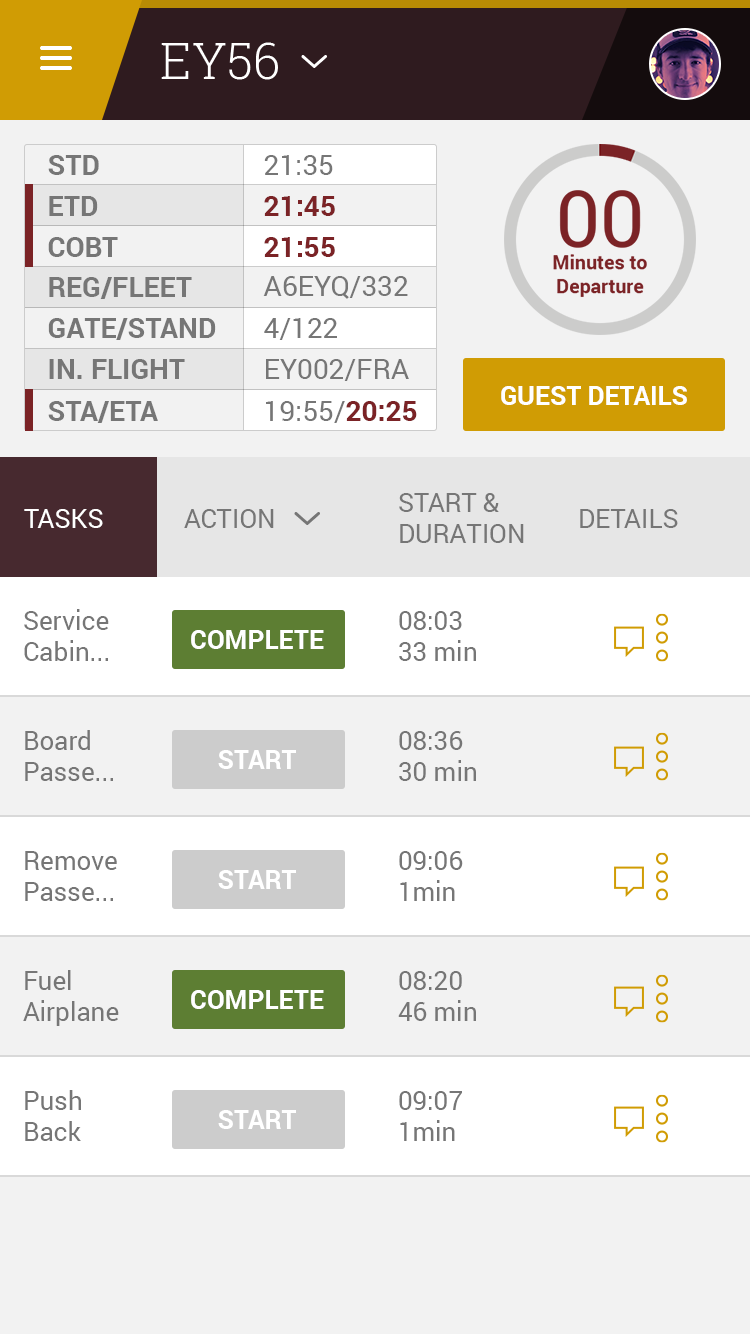
<style>
.page{position:relative;width:750px;height:1334px;background:#f2f2f2}
.page>*{position:absolute;margin:0}
.t1{font:28px "Roboto-Bold";color:#767676;text-transform:uppercase}
.t2{font:28px "Roboto-Regular";color:#767676}
.t3{font:28px "Roboto-Bold";color:#7b2326}
.t4{font:28px "Roboto-Regular";color:#767676;text-transform:uppercase}
.t5{font:26px "Roboto-Bold";color:#ffffff;text-transform:uppercase}
.t6{font:26px "Roboto-Regular";color:#767676;text-transform:uppercase}
.t7{font:26px "Roboto-Regular";color:#ffffff;text-transform:uppercase}
.t8{font:26px "Roboto-Regular";color:#767676}
</style>
<div class="page">
<p class="t1" style="left:48px;top:155px;width:51px;height:20px">STD</p>
<p class="t2" style="left:264px;top:155px;width:69px;height:20px">21:35</p>
<p class="t1" style="left:49px;top:196px;width:49px;height:20px">ETD</p>
<p class="t3" style="left:264px;top:196px;width:71px;height:20px">21:45</p>
<p class="t1" style="left:48px;top:237px;width:70px;height:20px">COBT</p>
<p class="t3" style="left:264px;top:237px;width:71px;height:20px">21:55</p>
<p class="t1" style="left:49px;top:277px;width:143px;height:22px">Reg/Fleet</p>
<p class="t2" style="left:263px;top:276px;width:145px;height:23px">A6EYQ/332</p>
<p class="t1" style="left:48px;top:318px;width:168px;height:22px">Gate/Stand</p>
<p class="t2" style="left:264px;top:318px;width:73px;height:22px">4/122</p>
<p class="t1" style="left:49px;top:359px;width:136px;height:20px">In. Flight</p>
<p class="t4" style="left:266px;top:359px;width:143px;height:22px">EY002/Fra</p>
<p class="t5" style="left:501px;top:386px;width:186px;height:19px">Guest Details</p>
<p class="t1" style="left:48px;top:401px;width:110px;height:22px">STA/ETA</p>
<p class="t2" style="left:266px;top:401px;width:151px;height:22px">19:55/<span class="t3">20:25</span></p>
<p class="t6" style="left:399px;top:493px;width:125px;height:50px">Start &amp;<br>Duration</p>
<p class="t7" style="left:24px;top:509px;width:79px;height:19px">tasks</p>
<p class="t6" style="left:184px;top:509px;width:90px;height:19px">Action</p>
<p class="t6" style="left:580px;top:509px;width:98px;height:19px">Details</p>
<p class="t8" style="left:24px;top:609px;width:85px;height:52px">Service<br>Cabin...</p>
<p class="t8" style="left:399px;top:611px;width:77px;height:50px">08:03<br>33 min</p>
<p class="t5" style="left:191px;top:630px;width:133px;height:19px">Complete</p>
<p class="t8" style="left:25px;top:730px;width:88px;height:51px">Board<br>Passe...</p>
<p class="t8" style="left:399px;top:731px;width:77px;height:50px">08:36<br>30 min</p>
<p class="t5" style="left:218px;top:750px;width:78px;height:19px">Start</p>
<p class="t8" style="left:25px;top:851px;width:92px;height:50px">Remove<br>Passe...</p>
<p class="t8" style="left:399px;top:851px;width:64px;height:50px">09:06<br>1min</p>
<p class="t5" style="left:218px;top:870px;width:78px;height:19px">Start</p>
<p class="t8" style="left:23px;top:970px;width:96px;height:56px">Fuel<br>Airplane</p>
<p class="t8" style="left:398px;top:971px;width:78px;height:50px">08:20<br>46 min</p>
<p class="t5" style="left:191px;top:990px;width:133px;height:19px">Complete</p>
<p class="t8" style="left:25px;top:1090px;width:56px;height:51px">Push<br>Back</p>
<p class="t8" style="left:399px;top:1091px;width:63px;height:50px">09:07<br>1min</p>
<p class="t5" style="left:218px;top:1110px;width:78px;height:19px">Start</p>
</div>
